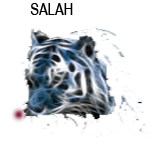
<style>
.page{position:relative;width:150px;height:150px;background:#ffffff}
.page>*{position:absolute;margin:0}
.t1{font:16px "Revit_HEB_SHX";color:#000000}
</style>
<div class="page">
<p class="t1" style="left:30px;top:3px;width:43px;height:12px">Salah</p>
</div>
